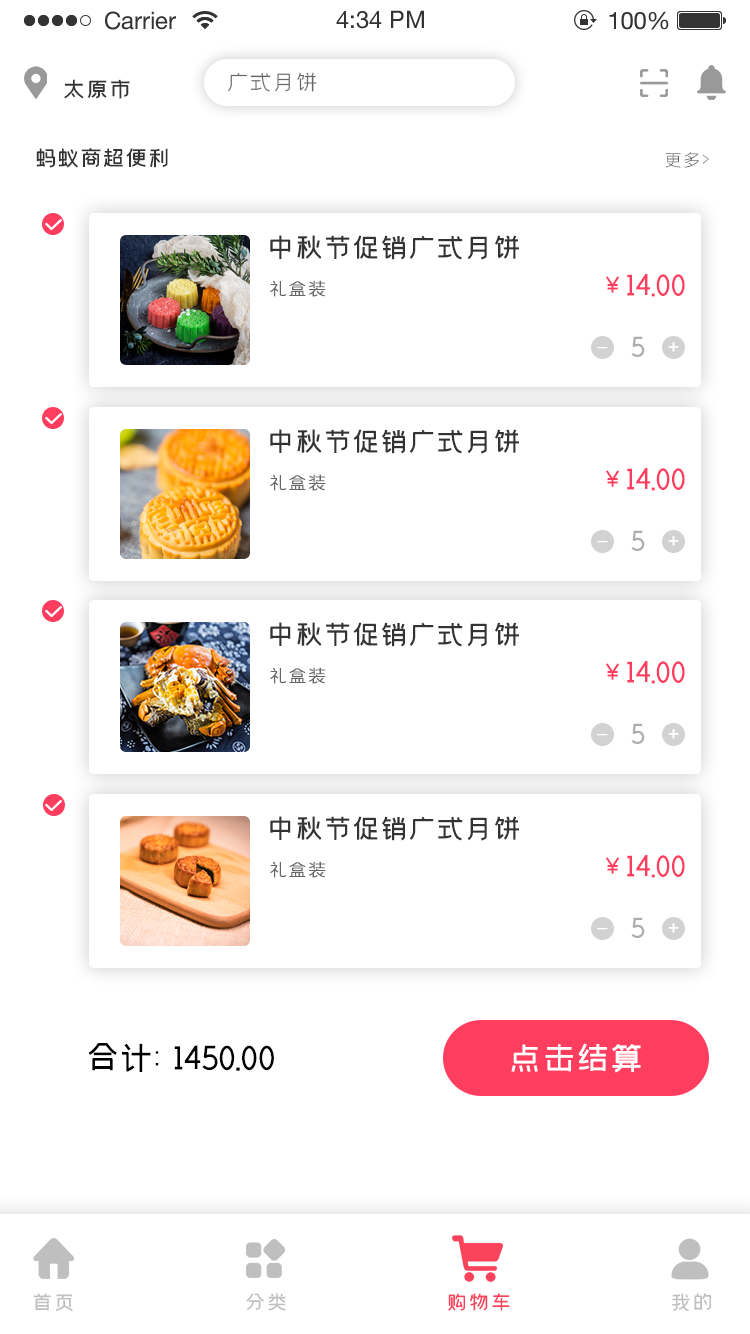
<style>
.page{position:relative;width:750px;height:1334px;background:#ffffff}
.page>*{position:absolute;margin:0}
.t1{font:24px "58--Regular";letter-spacing:-0.04em;color:#666666}
.t2{font:24px "59--Regular";letter-spacing:-0.04em;color:#333333}
.t3{font:24px "59--Regular";letter-spacing:-0.06em;color:#333333;text-transform:uppercase}
.t4{font:20px "58--Regular";letter-spacing:-0.06em;color:#666666;text-transform:uppercase}
.t5{font:30px "59--Regular";letter-spacing:-0.06em;color:#333333;text-transform:uppercase}
.t6{font:20px "58--Regular";letter-spacing:-0.06em;color:#666666;text-transform:uppercase;font-weight:bold}
.t7{font:31.9px "59--Regular";letter-spacing:-0.06em;color:#ff3d5f;text-transform:uppercase}
.t8{font:26.6px "59--Regular";letter-spacing:-0.06em;color:#ff3d5f;text-transform:uppercase}
.t9{font:30px "59--Regular";letter-spacing:-0.06em;color:#adadad;text-transform:uppercase}
.t10{font:24px "59--Regular";letter-spacing:-0.06em;color:#ffffff;text-transform:uppercase}
.t11{font:36px "59--Regular";letter-spacing:-0.06em;color:#000000;text-transform:uppercase}
.t12{font:36px "59--Regular";letter-spacing:-0.06em;color:#ffffff;text-transform:uppercase}
.t13{font:22px "59--Regular";color:#bfbfbf;text-transform:uppercase}
.t14{font:22px "59--Regular";color:#fb435b;text-transform:uppercase}
</style>
<div class="page">
<p class="t1" style="left:228px;top:72px;width:89px;height:20px">广式月饼</p>
<p class="t2" style="left:64px;top:79px;width:66px;height:20px">太原市</p>
<p class="t3" style="left:36px;top:147px;width:132px;height:21px">蚂蚁商超便利</p>
<p class="t4" style="left:665px;top:152px;width:44px;height:16px">更多&gt;</p>
<p class="t5" style="left:270px;top:235px;width:249px;height:25px">中秋节促销广式月饼</p>
<p class="t6" style="left:270px;top:280px;width:56px;height:17px">礼盒装</p>
<p class="t7" style="left:606px;top:274px;width:79px;height:23px"><span class="t8">￥</span>14.00</p>
<p class="t9" style="left:631px;top:336px;width:14px;height:21px">5</p>
<p class="t10" style="left:668px;top:342px;width:11px;height:10px">+</p>
<p class="t10" style="left:597px;top:347px;width:11px;height:2px">-</p>
<p class="t5" style="left:270px;top:429px;width:249px;height:25px">中秋节促销广式月饼</p>
<p class="t7" style="left:606px;top:468px;width:79px;height:23px"><span class="t8">￥</span>14.00</p>
<p class="t6" style="left:270px;top:474px;width:56px;height:17px">礼盒装</p>
<p class="t9" style="left:631px;top:530px;width:14px;height:21px">5</p>
<p class="t10" style="left:597px;top:541px;width:11px;height:2px">-</p>
<p class="t10" style="left:668px;top:536px;width:11px;height:10px">+</p>
<p class="t5" style="left:270px;top:622px;width:249px;height:25px">中秋节促销广式月饼</p>
<p class="t7" style="left:606px;top:661px;width:79px;height:23px"><span class="t8">￥</span>14.00</p>
<p class="t6" style="left:270px;top:667px;width:56px;height:17px">礼盒装</p>
<p class="t9" style="left:631px;top:723px;width:14px;height:21px">5</p>
<p class="t10" style="left:597px;top:734px;width:11px;height:2px">-</p>
<p class="t10" style="left:668px;top:729px;width:11px;height:10px">+</p>
<p class="t5" style="left:270px;top:816px;width:249px;height:25px">中秋节促销广式月饼</p>
<p class="t7" style="left:606px;top:855px;width:79px;height:23px"><span class="t8">￥</span>14.00</p>
<p class="t6" style="left:270px;top:861px;width:56px;height:17px">礼盒装</p>
<p class="t9" style="left:631px;top:917px;width:14px;height:21px">5</p>
<p class="t10" style="left:597px;top:928px;width:11px;height:2px">-</p>
<p class="t10" style="left:668px;top:923px;width:11px;height:10px">+</p>
<p class="t11" style="left:88px;top:1043px;width:186px;height:29px">合计:1450.00</p>
<p class="t12" style="left:511px;top:1043px;width:130px;height:30px">点击结算</p>
<p class="t13" style="left:33px;top:1293px;width:40px;height:19px">首页</p>
<p class="t13" style="left:246px;top:1293px;width:40px;height:18px">分类</p>
<p class="t14" style="left:448px;top:1293px;width:62px;height:18px">购物车</p>
<p class="t13" style="left:672px;top:1293px;width:39px;height:18px">我的</p>
</div>
